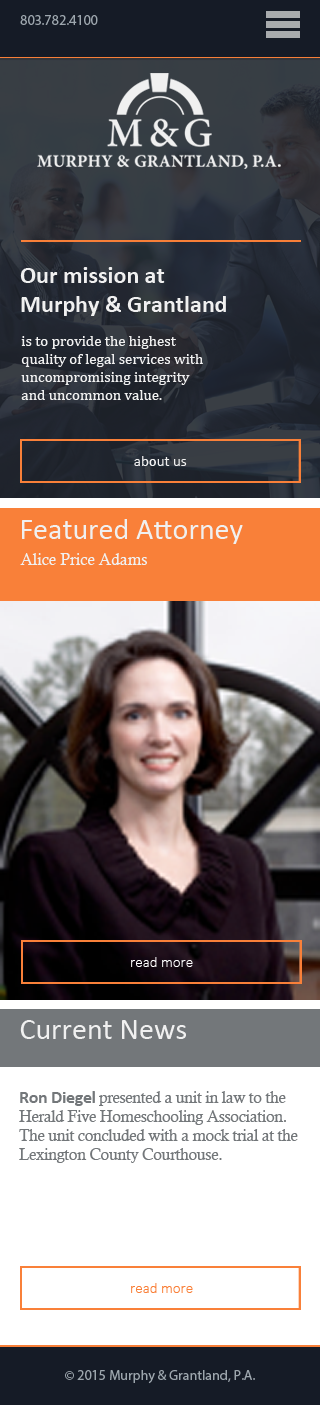
<style>
.page{position:relative;width:320px;height:1405px}
.page>*{position:absolute;margin:0}
.t1{font:14px "MyriadPro-Regular";color:#9da6ad}
.t2{font:24px "Calibri-Bold";color:#f0f0f0}
.t3{font:15px "Cambria";color:#f0f0f0}
.t4{font:15px "Calibri";color:#f0f0f0}
.t5{font:30px "Calibri";color:#f0f0f0}
.t6{font:16px "CalistoMT";color:#f0f0f0}
.t7{font:15px "Calibri-Light";color:#ffffff}
.t8{font:16px "CalistoMT";letter-spacing:-0.02em;color:#73777a}
.t9{font:18px "Calibri-Bold";letter-spacing:-0.02em;color:#73777a}
.t10{font:15px "Calibri-Light";color:#f98039}
</style>
<div class="page">
<p class="t1" style="left:20px;top:15px;width:78px;height:10px">803.782.4100</p>
<p class="t2" style="left:20px;top:267px;width:206px;height:49px">Our mission at <br>Murphy &amp; Grantland</p>
<p class="t3" style="left:21px;top:336px;width:182px;height:64px">is to provide the highest <br>quality of legal services with<br>uncompromising integrity <br>and uncommon value.</p>
<p class="t4" style="left:134px;top:456px;width:53px;height:10px">about us</p>
<p class="t5" style="left:22px;top:519px;width:221px;height:25px">Featured Attorney</p>
<p class="t6" style="left:20px;top:553px;width:127px;height:12px">Alice Price Adams</p>
<p class="t7" style="left:131px;top:957px;width:62px;height:10px">read more</p>
<p class="t5" style="left:20px;top:1020px;width:166px;height:19px">Current News</p>
<p class="t8" style="left:19px;top:1091px;width:279px;height:72px"><span class="t9">Ron Diegel </span>presented a unit in law to the <br>Herald Five Homeschooling Association. <br>The unit concluded with a mock trial at the <br>Lexington County Courthouse.</p>
<p class="t10" style="left:131px;top:1283px;width:62px;height:10px">read more</p>
<p class="t1" style="left:65px;top:1370px;width:190px;height:14px">© 2015 Murphy &amp; Grantland, P.A.</p>
</div>
